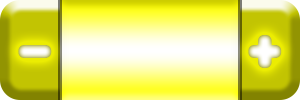
<style>
.page{position:relative;width:300px;height:100px}
.page>*{position:absolute;margin:0}
.t1{font:60px "Abduction";letter-spacing:0.03em;font-weight:bold}
</style>
<div class="page">
<p class="t1" style="left:248px;top:35px;width:34px;height:33px">+</p>
<p class="t1" style="left:18px;top:45px;width:34px;height:13px">-</p>
</div>
